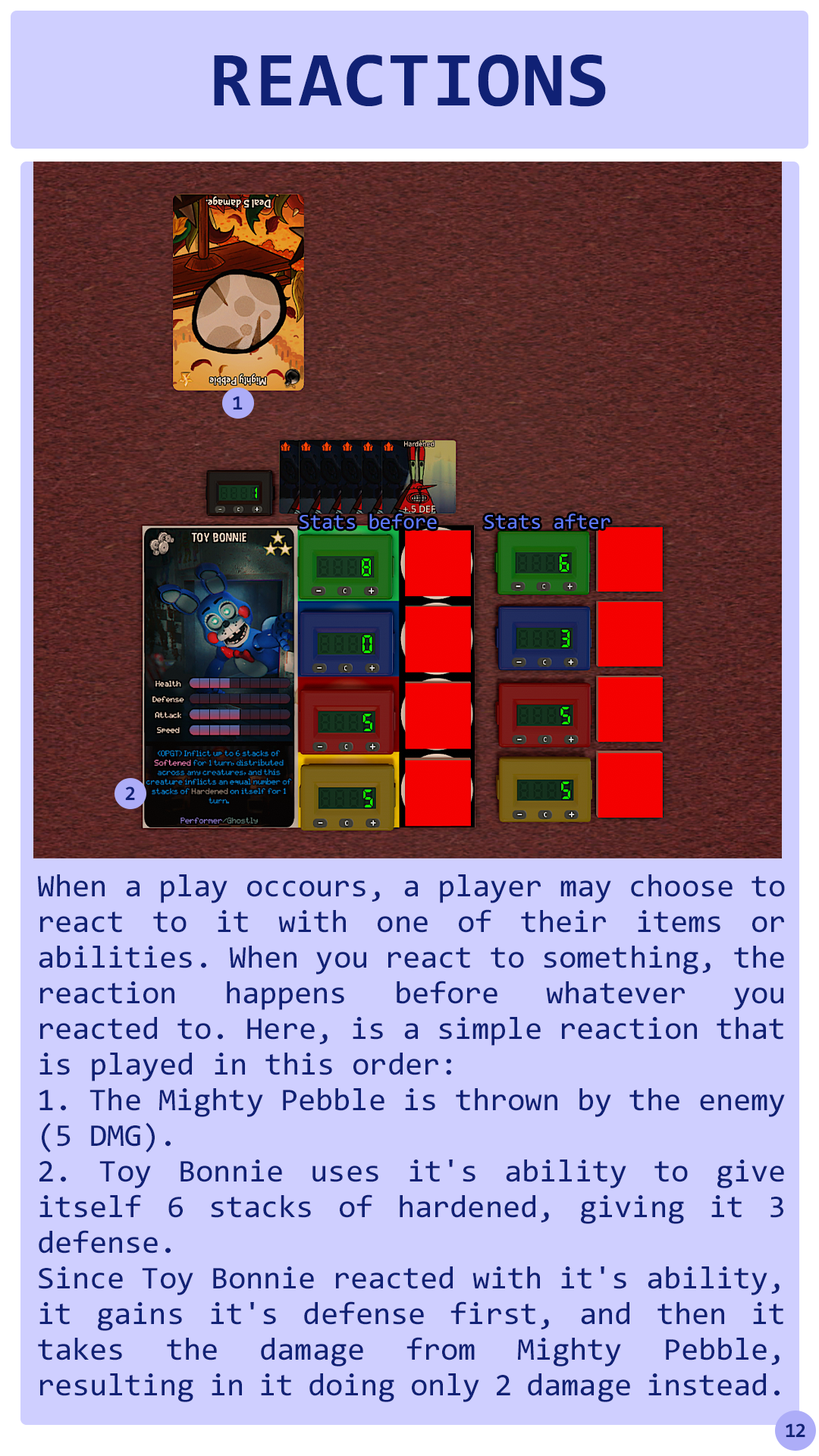
<style>
.page{position:relative;width:819px;height:1456px;background:#cfcfff}
.page>*{position:absolute;margin:0}
.t1{font:78.3px "Consolas-Bold";letter-spacing:0.02em;color:#102175}
.t2{font:20.5px "Consolas-Bold";color:#102175}
.t3{font:21.1px "Consolas";color:#5f79ff}
.t4{font:31.8px/35.6px "Consolas";color:#102175}
.t5{font:20.5px "Consolas-Bold";letter-spacing:-0.06em;color:#102175}
.t6{font:20.5px "Consolas-Bold";letter-spacing:-0.2em;color:#102175}
</style>
<div class="page">
<p class="t1" style="left:214px;top:55px;width:392px;height:52px">REACTIONS</p>
<p class="t2" style="left:233px;top:396px;width:10px;height:13px">1</p>
<p class="t3" style="left:300px;top:513px;width:137px;height:16px">Stats before</p>
<p class="t3" style="left:485px;top:513px;width:125px;height:16px">Stats after</p>
<p class="t2" style="left:125px;top:786px;width:10px;height:14px">2</p>
<p class="t4" style="left:38px;top:874px;width:747px;height:528px;text-align:justify">When a play occours, a player may choose to react to it with one of their items or abilities. When you react to something, the reaction happens before whatever you reacted to. Here, is a simple reaction that is played in this order:<br>1. The Mighty Pebble is thrown by the enemy (5 DMG).<br>2. Toy Bonnie uses it's ability to give itself 6 stacks of hardened, giving it 3 defense. <br>Since Toy Bonnie reacted with it's ability, it gains it's defense first, and then it takes the damage from Mighty Pebble, resulting in it doing only 2 damage instead. of 5.</p>
<p class="t5" style="left:786px;top:1423px;width:19px;height:14px">1<span class="t6">2</span></p>
</div>
